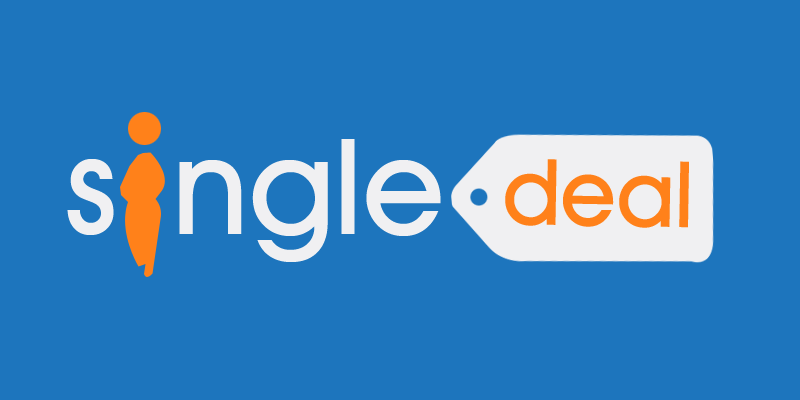
<style>
.page{position:relative;width:800px;height:400px;background:#1d75bd}
.page>*{position:absolute;margin:0}
.t1{font:133.3px "AvantGardeITCbyBT-Medium";color:#f0f0f2}
.t2{font:92.2px "AvantGardeITCbyBT-Medium";color:#ff811a}
</style>
<div class="page">
<p class="t1" style="left:179px;top:139px;width:262px;height:123px">ngle</p>
<p class="t1" style="left:67px;top:159px;width:47px;height:76px">s</p>
<p class="t2" style="left:505px;top:159px;width:184px;height:69px;rotate:1deg">deal</p>
</div>
